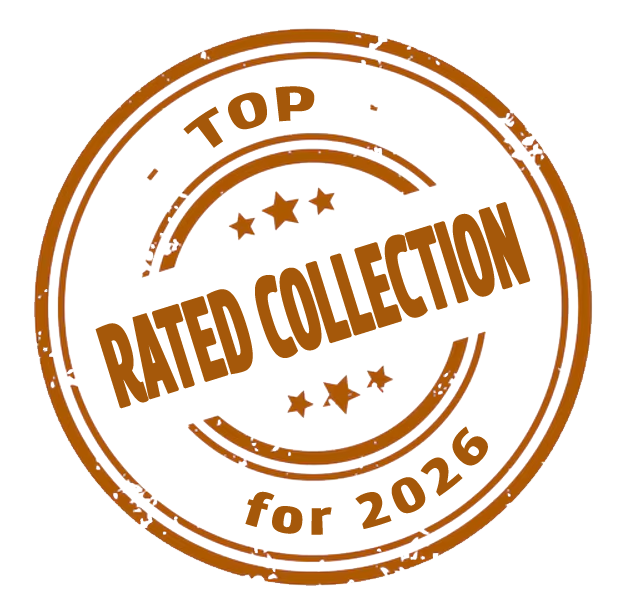
<style>
.page{position:relative;width:637px;height:601px;background:#ffffff}
.page>*{position:absolute;margin:0}
.t1{font:48px "GeoramaCondensed-Bold";letter-spacing:0.075em;color:#a5580a;scale:1.25 1}
.t2{font:115.2px "GeoramaCondensed-Bold";color:#a5580a;font-weight:bold;scale:0.56 1}
</style>
<div class="page">
<p class="t1" style="left:183px;top:86px;width:132px;height:62px;rotate:-17deg">TOP</p>
<p class="t2" style="left:95px;top:202px;width:436px;height:207px;rotate:-17deg">RATED COLLECTION</p>
<p class="t1" style="left:245px;top:426px;width:243px;height:109px;rotate:-17deg">for 2026</p>
</div>
